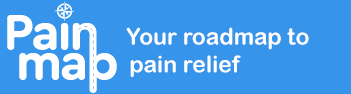
<style>
.page{position:relative;width:351px;height:94px;background:#3695eb}
.page>*{position:absolute;margin:0}
.t1{font:22.9px "ArialRoundedMTBold";color:#ffffff}
</style>
<div class="page">
<p class="t1" style="left:126px;top:27px;width:183px;height:23px">Your roadmap to</p>
<p class="t1" style="left:130px;top:55px;width:111px;height:22px">pain relief</p>
</div>
